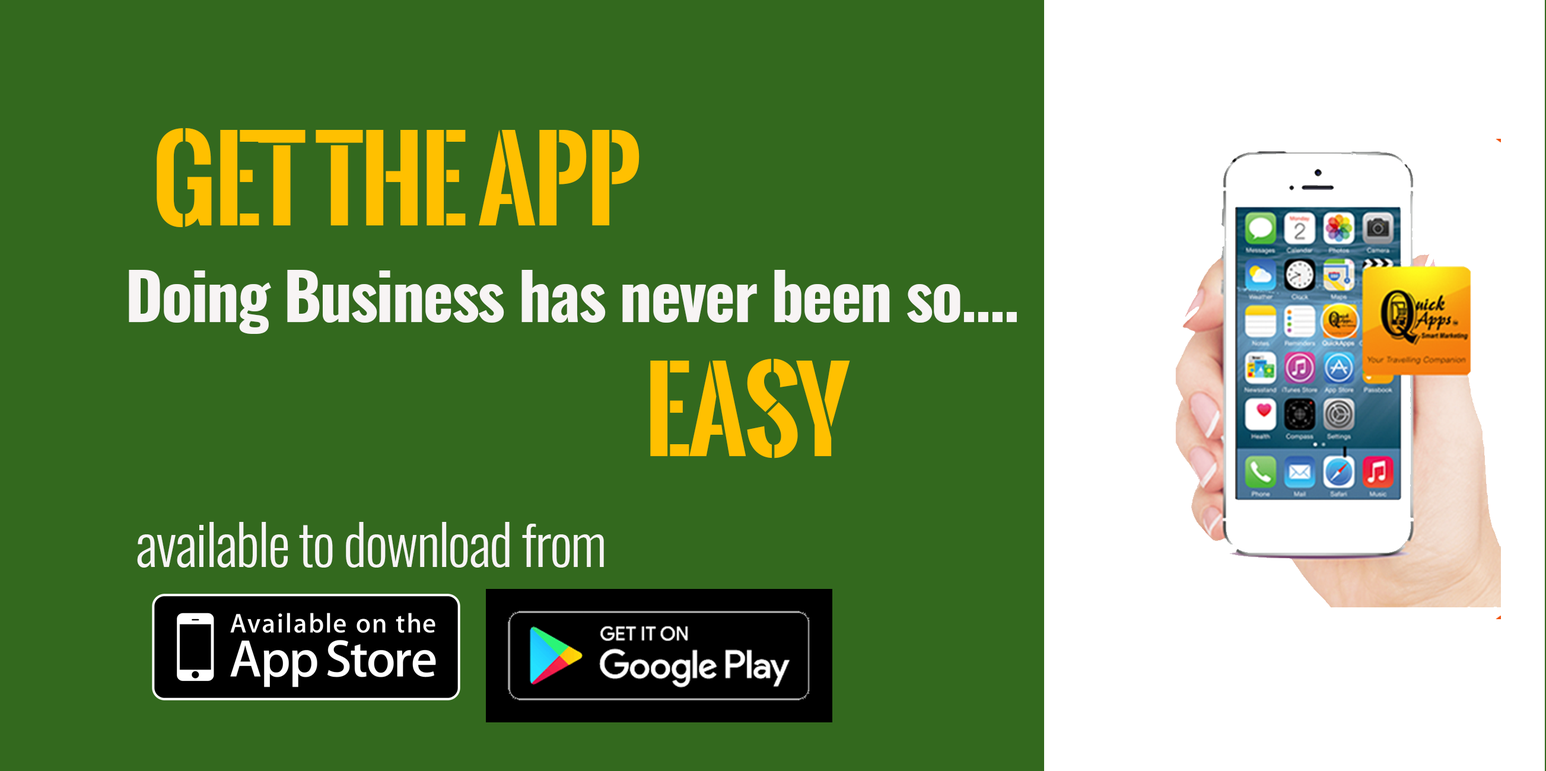
<style>
.page{position:relative;width:1546px;height:771px;background:#33691e}
.page>*{position:absolute;margin:0}
.t1{font:109.8px "OswaldStencil-Bold";letter-spacing:-0.025em;color:#ffc000}
.t2{font:64.7px "Oswald-Bold";letter-spacing:-0.025em;color:#f7f4f4}
.t3{font:55.8px "Oswald-Light";letter-spacing:-0.025em;color:#f7f4f4}
</style>
<div class="page">
<p class="t1" style="left:157px;top:128px;width:483px;height:99px">Get The App</p>
<p class="t2" style="left:129px;top:270px;width:888px;height:64px">Doing Business has never been so....</p>
<p class="t1" style="left:650px;top:358px;width:200px;height:101px">EASY</p>
<p class="t3" style="left:137px;top:522px;width:467px;height:46px">available to download from</p>
</div>
